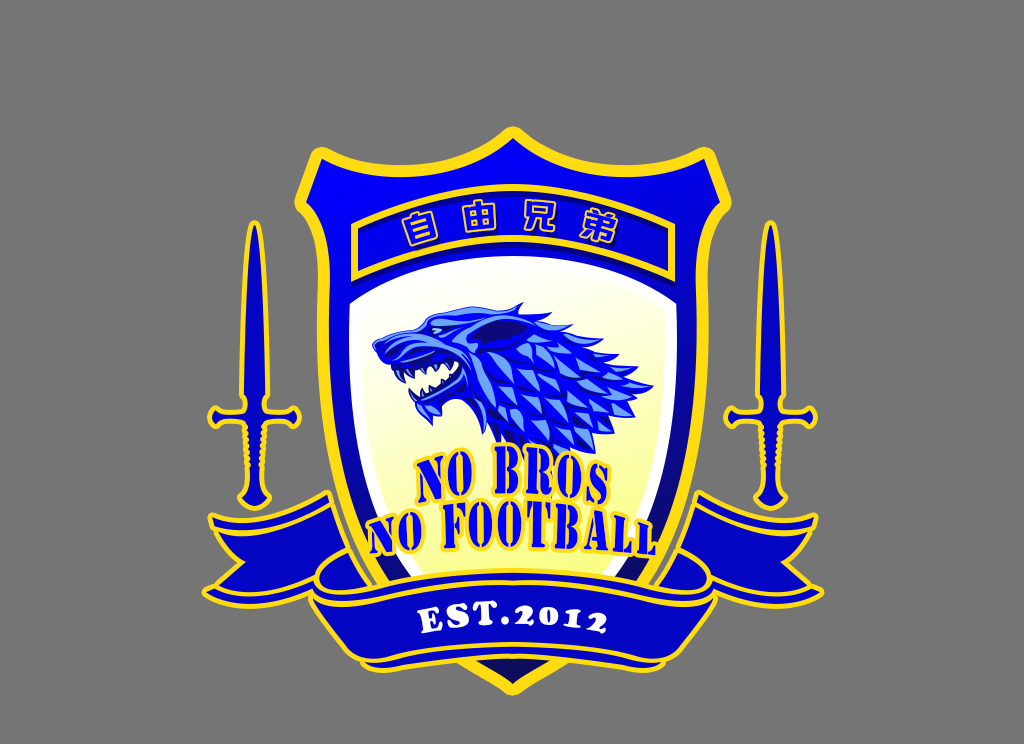
<style>
.page{position:relative;width:1024px;height:744px;background:#757575}
.page>*{position:absolute;margin:0}
.t1{font:30.9px "Tensentype-LingHeiJ";letter-spacing:0.15em;color:#0000ff}
.t2{font:34.5px/30px "StencilStd";letter-spacing:0.1em;color:#0000ff}
.t3{font:32.5px "CooperBlackStd";letter-spacing:0.1em;color:#ffffff}
</style>
<div class="page">
<p class="t1" style="left:403px;top:200px;width:214px;height:45px">自 由 兄 弟</p>
<p class="t2" style="left:369px;top:446px;width:287px;height:110px;text-align:center">No bros <br> no football</p>
<p class="t3" style="left:417px;top:600px;width:190px;height:34px">EST.2012</p>
</div>
